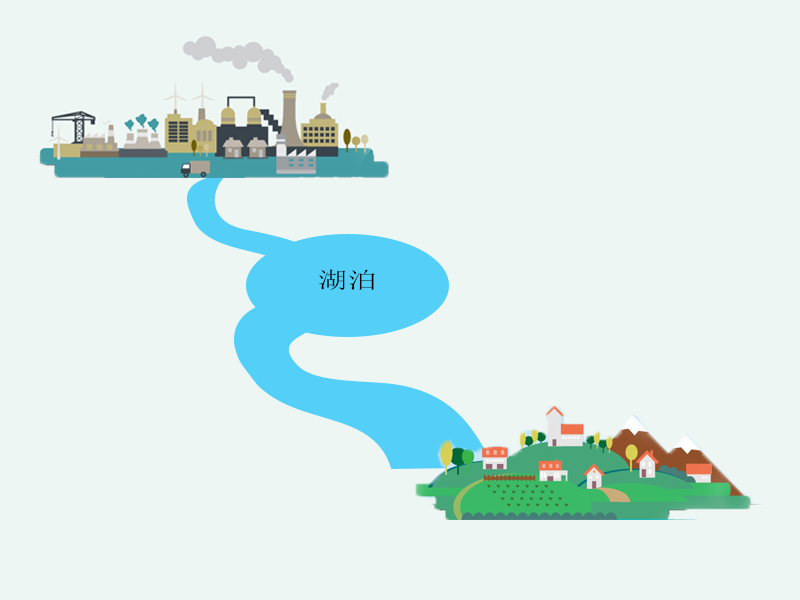
<style>
.page{position:relative;width:800px;height:600px;background:#edf6f3}
.page>*{position:absolute;margin:0}
.t1{font:22.9px "SimSun";color:#000000;scale:1.29 1}
</style>
<div class="page">
<p class="t1" style="left:319px;top:269px;width:56px;height:21px">湖泊</p>
</div>
